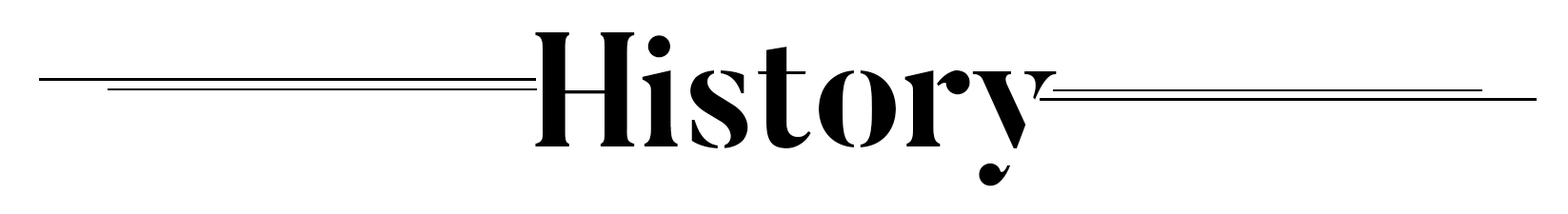
<style>
.page{position:relative;width:1568px;height:214px;background:#ffffff}
.page>*{position:absolute;margin:0}
.t1{font:161.8px "ButlerStencil-Bold";color:#000000}
</style>
<div class="page">
<p class="t1" style="left:535px;top:32px;width:522px;height:155px">History</p>
</div>
